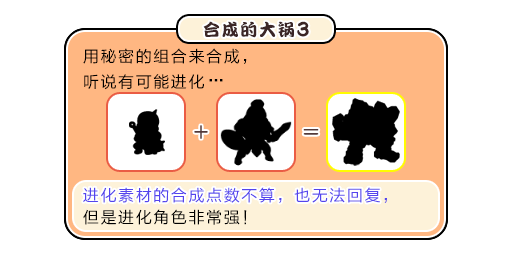
<style>
.page{position:relative;width:512px;height:256px;background:#ffffff}
.page>*{position:absolute;margin:0}
.t1{font:17px "DFPKanTingLiuW9";letter-spacing:0.1em;color:#3b2626}
.t2{font:21.6px "DFPKanTingLiuW9";letter-spacing:0.1em;color:#3b2626;scale:0.83 1}
.t3{font:16px/22px "FZLTHJW--GB1-0";letter-spacing:0.1em;color:#000000}
.t4{font:20px/22px "FZLTHJW--GB1-0";letter-spacing:0.1em;color:#000000}
.t5{font:16px/22px "FZLTHJW--GB1-0";letter-spacing:0.1em;color:#5444ed}
.t6{font:16px "FZLTHJW--GB1-0";letter-spacing:0.1em;color:#5444ed}
</style>
<div class="page">
<p class="t1" style="left:203px;top:21px;width:106px;height:17px">合成的大锅<span class="t2">3</span></p>
<p class="t3" style="left:83px;top:48px;width:164px;height:42px">用秘密的组合来合成，<br>听说有可能进化<span class="t4">…</span></p>
<p class="t5" style="left:83px;top:187px;width:304px;height:38px">进化素材的合成点数不算，也无法回复，<br><span class="t3">但是进化角色非常强！</span></p>
<p class="t6" style="left:83px;top:187px;width:297px;height:16px">进化素材的合成点数不算，也无法回复</p>
</div>
